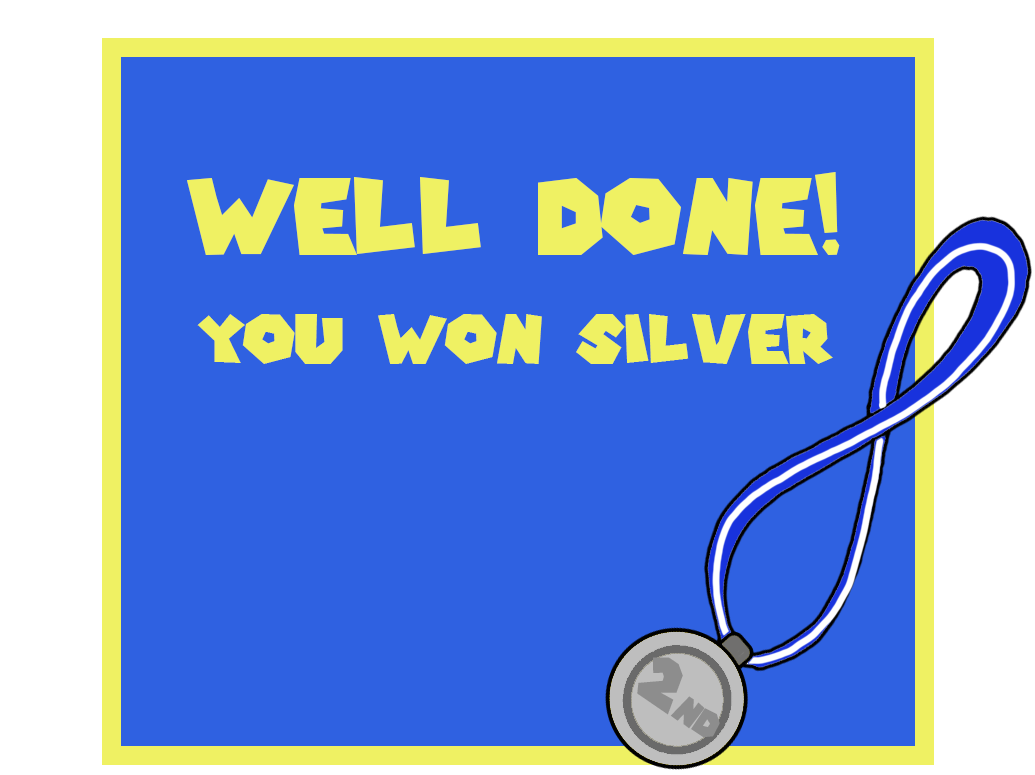
<style>
.page{position:relative;width:1035px;height:775px;background:#2f61e1}
.page>*{position:absolute;margin:0}
.t1{font:66.7px/108.5px "SuperMarioGalaxy";color:#eff163}
.t2{font:104.2px/171px "SuperMarioGalaxy";color:#eff163}
.t3{font:36.1px "SuperMarioGalaxy";color:#8d8d8d}
.t4{font:64.4px "SuperMarioGalaxy";color:#8d8d8d}
</style>
<div class="page">
<p class="t1" style="left:187px;top:172px;width:653px;height:192px;text-align:center"><span class="t2">Well done!<br></span>you won silver</p>
<p class="t3" style="left:637px;top:657px;width:83px;height:81px;rotate:34deg"><span class="t4">2</span>nd</p>
</div>
